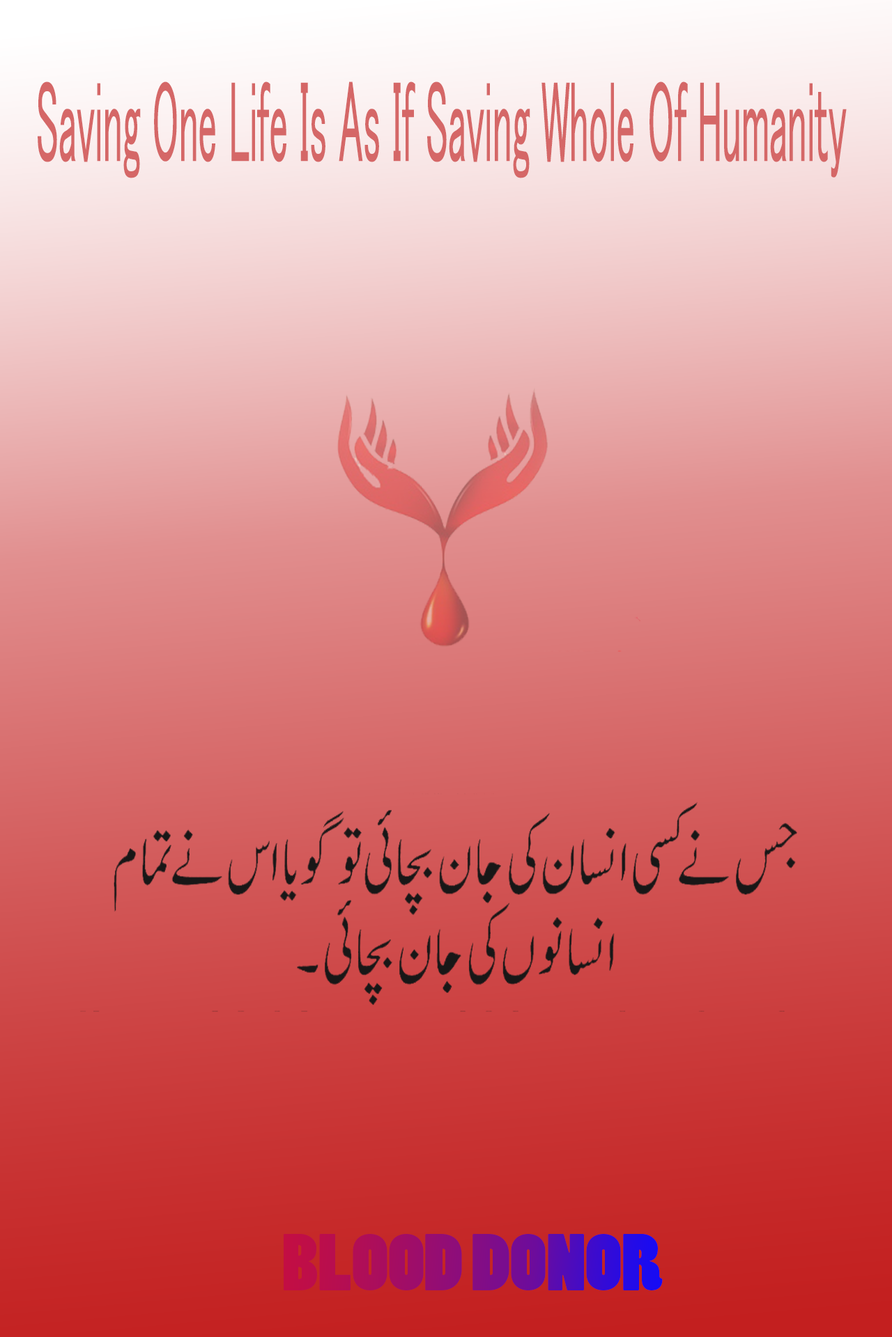
<style>
.page{position:relative;width:892px;height:1337px}
.page>*{position:absolute;margin:0}
.t1{font:116.8px "MS-PGothic";color:#d56767;scale:0.33 1}
.t2{font:75.2px "PoplarStd";scale:1.08 1}
</style>
<div class="page">
<p class="t1" style="left:38px;top:81px;width:808px;height:97px">Saving One Life Is As If Saving Whole Of Humanity</p>
<p class="t2" style="left:284px;top:1234px;width:378px;height:57px">BLOOD DONOR</p>
</div>
